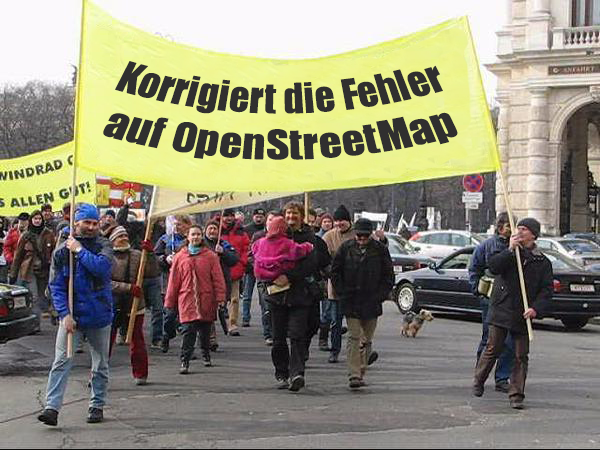
<style>
.page{position:relative;width:600px;height:450px}
.page>*{position:absolute;margin:0}
.t1{font:37.5px "Impact";color:#302f2f}
</style>
<div class="page">
<p class="t1" style="left:103px;top:61px;width:355px;height:99px;text-align:center">Korrigiert die Fehler<br>auf OpenStreetMap</p>
</div>
